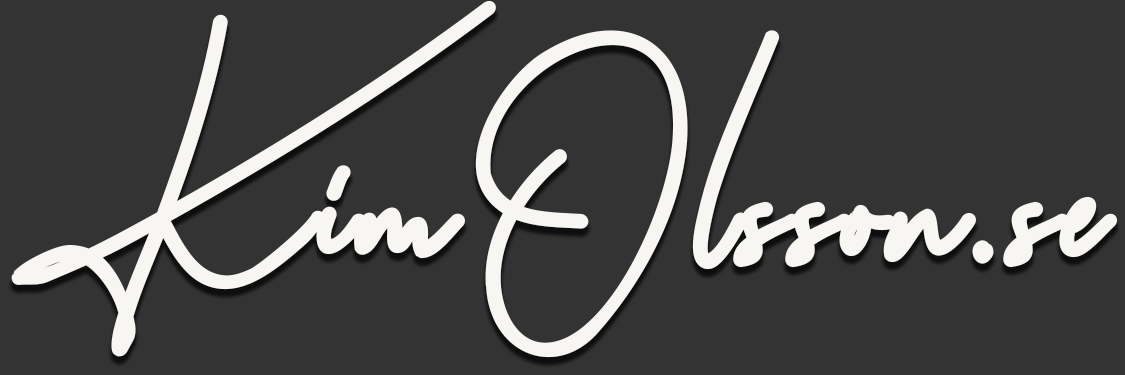
<style>
.page{position:relative;width:1125px;height:375px;background:#333333}
.page>*{position:absolute;margin:0}
.t1{font:328.8px "KatherineFree";color:#f7f6f3;font-weight:bold}
</style>
<div class="page">
<p class="t1" style="left:11px;top:0px;width:983px;height:358px">KimOlsson.</p>
<p class="t1" style="left:1003px;top:196px;width:114px;height:72px">se</p>
</div>
